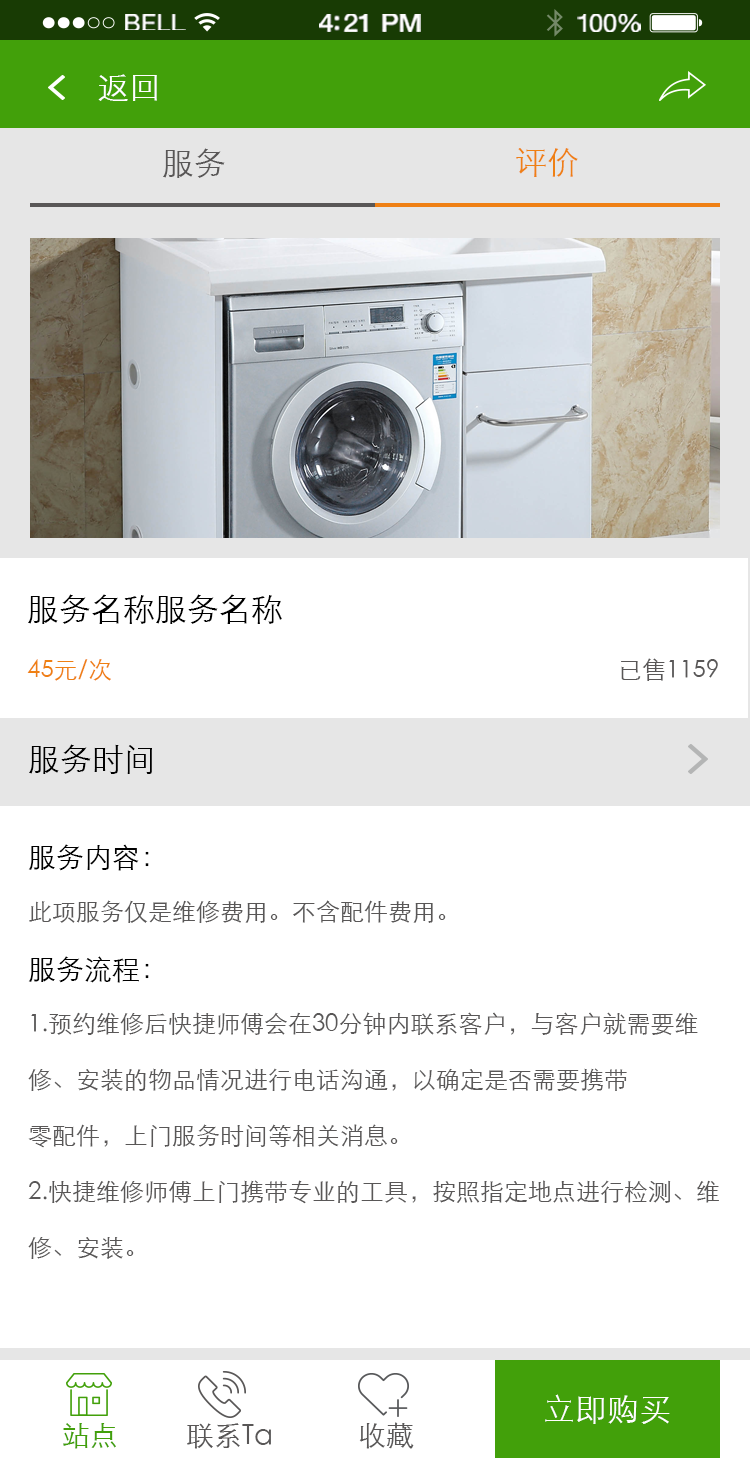
<style>
.page{position:relative;width:750px;height:1458px;background:#ffffff}
.page>*{position:absolute;margin:0}
.t1{font:23.3px "HelveticaNeue";letter-spacing:0.02em;color:#ffffff;scale:1.06 1}
.t2{font:25.3px "HelveticaNeue-Medium";letter-spacing:-0.02em;color:#ffffff;scale:1.06 1}
.t3{font:24.3px "HelveticaNeue";letter-spacing:-0.02em;color:#ffffff;scale:1.06 1}
.t4{font:32px "STXihei";color:#ffffff}
.t5{font:32px "STXihei";color:#595757}
.t6{font:32px "STXihei";color:#ef8014}
.t7{font:32px "STXihei";color:#000000}
.t8{font:24px "STXihei";color:#ef8013}
.t9{font:24px "STXihei";color:#595757}
.t10{font:24px/56px "STXihei";color:#595757}
.t11{font:28px/56px "STXihei";color:#000000}
.t12{font:32px "STXihei";color:#fffefe}
.t13{font:28px "STXihei";color:#595757}
.t14{font:28px "STXihei";color:#42a00a}
</style>
<div class="page">
<p class="t1" style="left:125px;top:14px;width:61px;height:16px">BELL</p>
<p class="t2" style="left:319px;top:14px;width:102px;height:18px">4:21 PM</p>
<p class="t3" style="left:577px;top:14px;width:64px;height:18px">100%</p>
<p class="t4" style="left:98px;top:74px;width:59px;height:27px">返回</p>
<p class="t5" style="left:163px;top:148px;width:62px;height:30px">服务</p>
<p class="t6" style="left:516px;top:148px;width:62px;height:29px">评价</p>
<p class="t7" style="left:28px;top:594px;width:254px;height:30px">服务名称服务名称</p>
<p class="t8" style="left:27px;top:659px;width:84px;height:22px">45元/次</p>
<p class="t9" style="left:621px;top:658px;width:97px;height:23px">已售1159</p>
<p class="t7" style="left:29px;top:744px;width:123px;height:30px">服务时间</p>
<p class="t10" style="left:28px;top:844px;width:691px;height:415px"><span class="t11">服务内容：<br></span>此项服务仅是维修费用。不含配件费用。<br><span class="t11">服务流程：<br></span>1.预约维修后快捷师傅会在30分钟内联系客户，与客户就需要维修、安装的物品情况进行电话沟通，以确定是否需要携带<br>零配件，上门服务时间等相关消息。<br>2.快捷维修师傅上门携带专业的工具，按照指定地点进行检测、维修、安装。</p>
<p class="t12" style="left:545px;top:1394px;width:125px;height:30px">立即购买</p>
<p class="t13" style="left:359px;top:1422px;width:55px;height:27px">收藏</p>
<p class="t14" style="left:63px;top:1423px;width:53px;height:26px">站点</p>
<p class="t13" style="left:187px;top:1423px;width:84px;height:26px">联系Ta</p>
</div>
